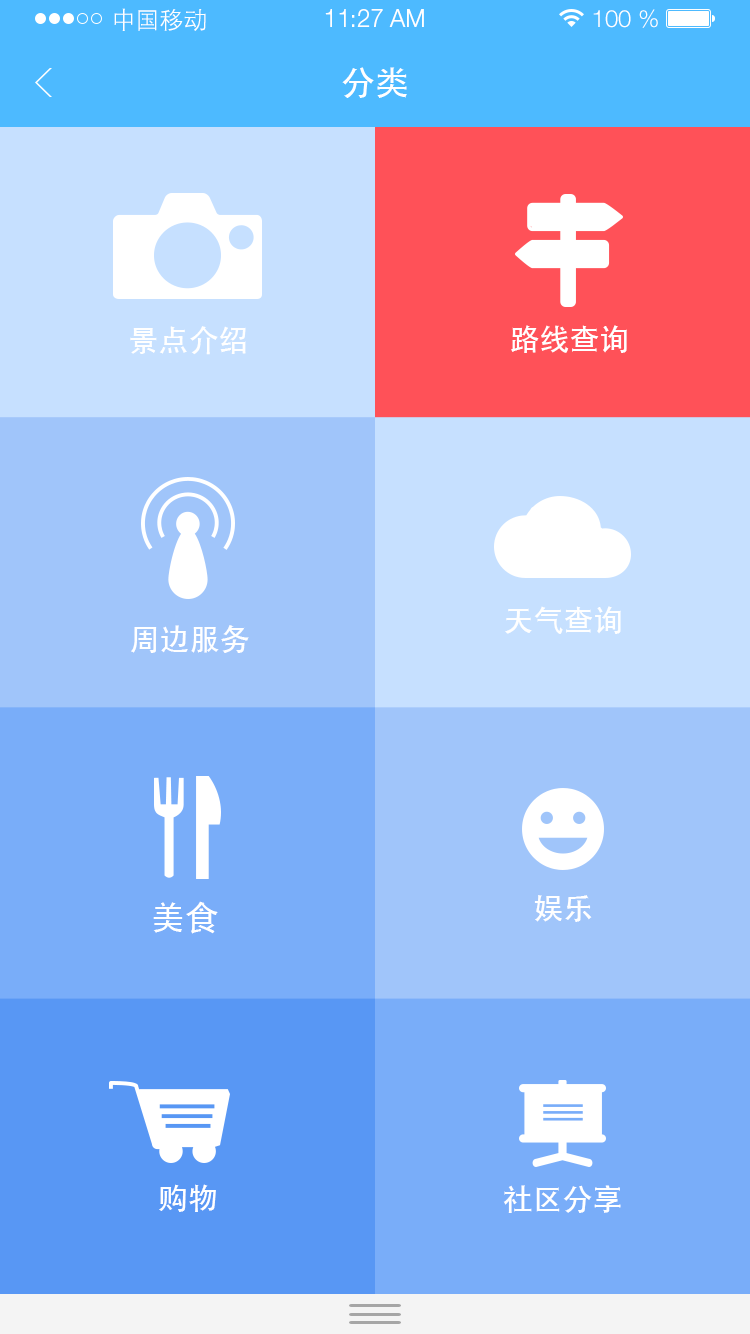
<style>
.page{position:relative;width:750px;height:1334px;background:#a0c5fa}
.page>*{position:absolute;margin:0}
.t1{font:24px "STXihei";color:#ffffff}
.t2{font:24px "HelveticaNeueLTPro-Lt";color:#ffffff}
.t3{font:34px "STHeiti";color:#ffffff}
.t4{font:30px "STHeiti";color:#ffffff}
</style>
<div class="page">
<p class="t1" style="left:114px;top:8px;width:92px;height:23px">中国移动</p>
<p class="t2" style="left:325px;top:9px;width:99px;height:18px">11:27 AM</p>
<p class="t2" style="left:593px;top:9px;width:65px;height:19px">100 %</p>
<p class="t3" style="left:342px;top:67px;width:65px;height:31px">分类</p>
<p class="t4" style="left:130px;top:326px;width:116px;height:29px">景点介绍</p>
<p class="t4" style="left:511px;top:325px;width:116px;height:28px">路线查询</p>
<p class="t4" style="left:505px;top:606px;width:116px;height:28px">天气查询</p>
<p class="t4" style="left:131px;top:625px;width:118px;height:28px">周边服务</p>
<p class="t3" style="left:153px;top:901px;width:65px;height:33px">美食</p>
<p class="t4" style="left:534px;top:895px;width:58px;height:27px">娱乐</p>
<p class="t4" style="left:159px;top:1184px;width:57px;height:28px">购物</p>
<p class="t4" style="left:503px;top:1185px;width:118px;height:28px">社区分享</p>
</div>
